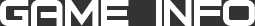
<style>
.page{position:relative;width:255px;height:26px;background:#ffffff}
.page>*{position:absolute;margin:0}
.t1{font:50px "Bitsumishi";color:#ffffff}
</style>
<div class="page">
<p class="t1" style="left:0px;top:0px;width:255px;height:26px">Game Info</p>
</div>
